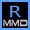
<style>
.page{position:relative;width:30px;height:30px;background:#000000}
.page>*{position:absolute;margin:0}
.t1{font:15.3px "MicrosoftYaHei";color:#589fff;scale:1.28 1}
.t2{font:11px "Dodger";color:#c8c8c8;scale:0.73 1}
</style>
<div class="page">
<p class="t1" style="left:10px;top:5px;width:11px;height:13px">R</p>
<p class="t2" style="left:3px;top:19px;width:25px;height:8px">MMD</p>
</div>
